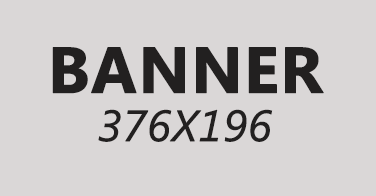
<style>
.page{position:relative;width:376px;height:196px;background:#dad7d7}
.page>*{position:absolute;margin:0}
.t1{font:64.5px "SegoeUI-Bold";color:#222020;text-transform:uppercase;font-weight:bold}
.t2{font:43.6px "SegoeUI-Italic";color:#222020;text-transform:uppercase;font-weight:bold}
</style>
<div class="page">
<p class="t1" style="left:52px;top:47px;width:272px;height:47px">BANNER</p>
<p class="t2" style="left:98px;top:109px;width:175px;height:33px">376x196</p>
</div>
